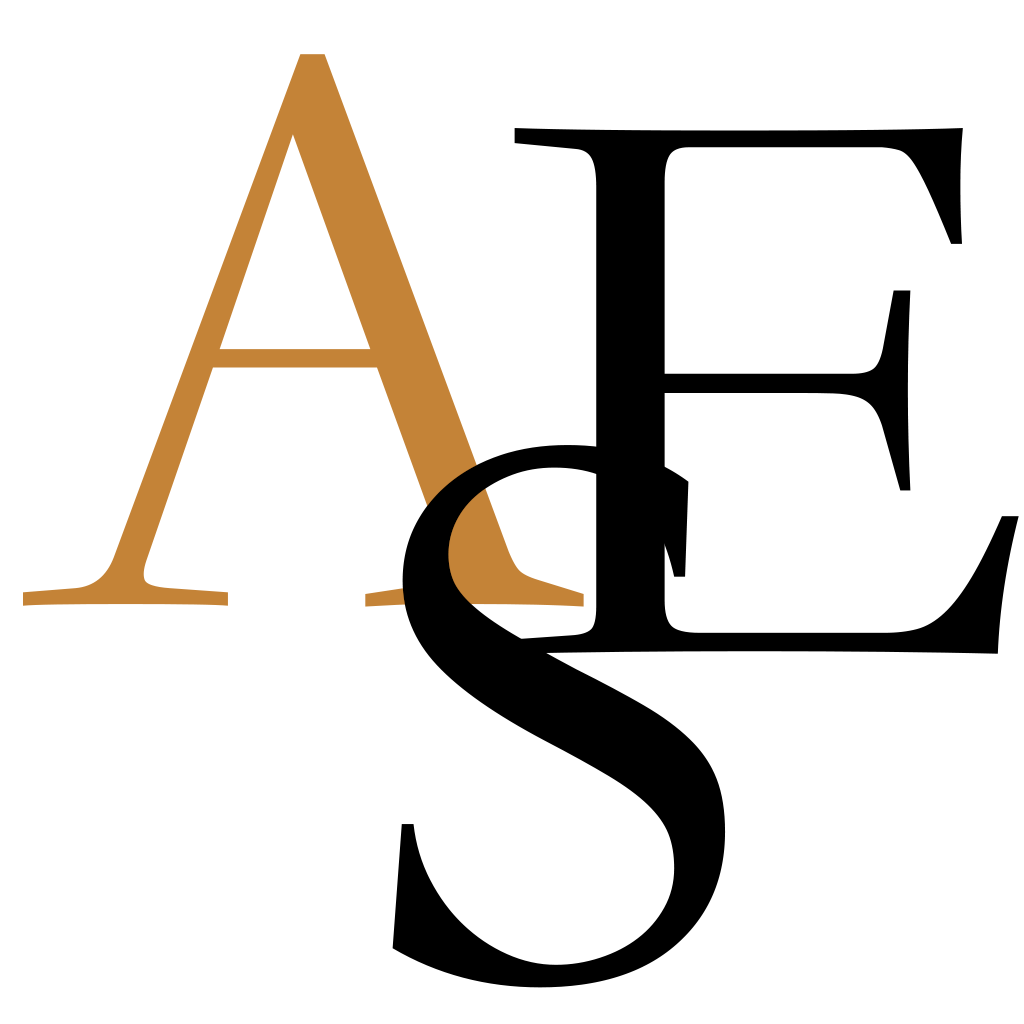
<style>
.page{position:relative;width:1024px;height:1024px;background:#ffffff}
.page>*{position:absolute;margin:0}
.t1{font:833.3px "STKaitiSC-Regular";color:#c48337}
.t2{font:833.3px "STKaitiSC-Regular";color:#000000}
</style>
<div class="page">
<p class="t1" style="left:23px;top:54px;width:561px;height:553px">A</p>
<p class="t2" style="left:511px;top:128px;width:508px;height:526px">E</p>
<p class="t2" style="left:392px;top:445px;width:334px;height:543px">S</p>
</div>
